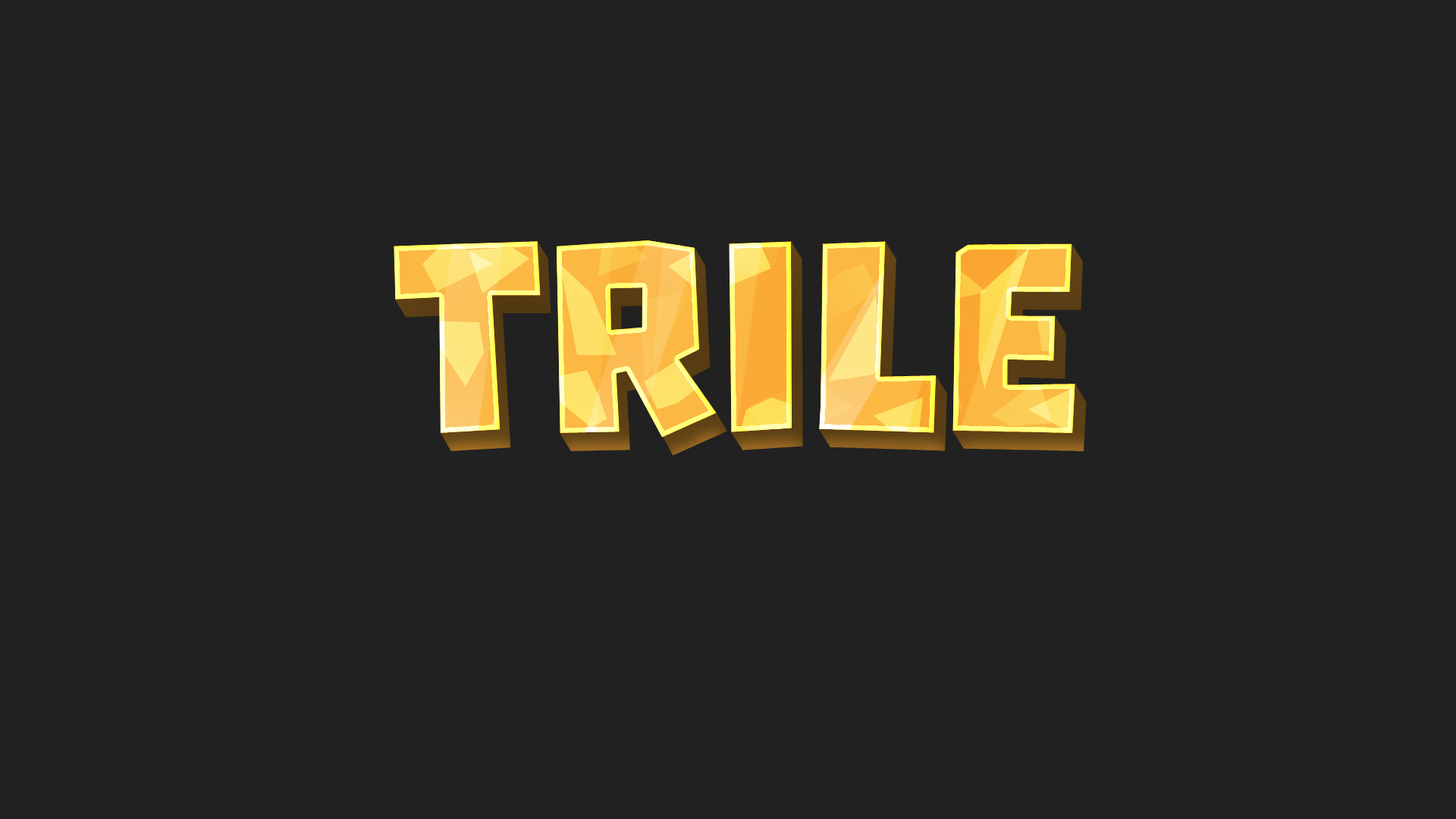
<style>
.page{position:relative;width:1456px;height:819px;background:#212121}
.page>*{position:absolute;margin:0}
.t1{font:303px "Troika"}
</style>
<div class="page">
<p class="t1" style="left:394px;top:240px;width:681px;height:198px">TRILE</p>
</div>
